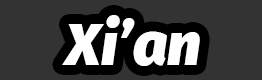
<style>
.page{position:relative;width:262px;height:80px;background:#333333}
.page>*{position:absolute;margin:0}
.t1{font:60px "FiraSans-BlackItalic";color:#ffffff}
</style>
<div class="page">
<p class="t1" style="left:62px;top:15px;width:138px;height:51px">Xi’an</p>
</div>
